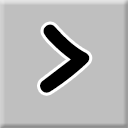
<style>
.page{position:relative;width:128px;height:128px;background:#bfbfbf}
.page>*{position:absolute;margin:0}
.t1{font:148px "ComicSansMS";color:#000000}
</style>
<div class="page">
<p class="t1" style="left:40px;top:24px;width:50px;height:69px">&gt;</p>
</div>
